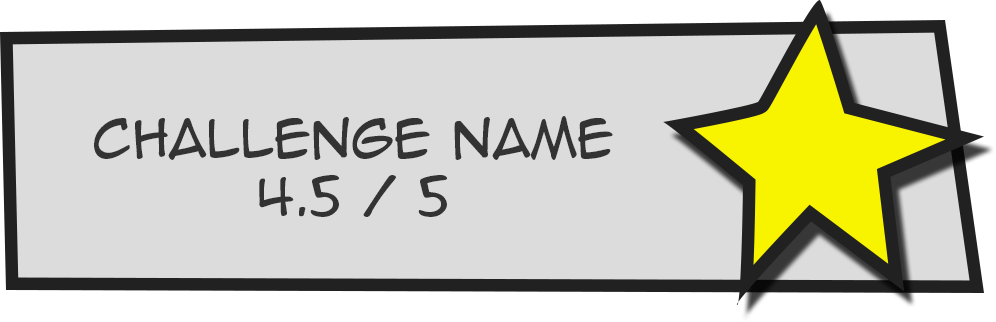
<style>
.page{position:relative;width:996px;height:322px;background:#dcdcdc}
.page>*{position:absolute;margin:0}
.t1{font:48.7px "AnimeAce2.0BB";color:#343333}
</style>
<div class="page">
<p class="t1" style="left:94px;top:116px;width:519px;height:101px;text-align:center">Challenge Name <br>4.5 / 5</p>
</div>
